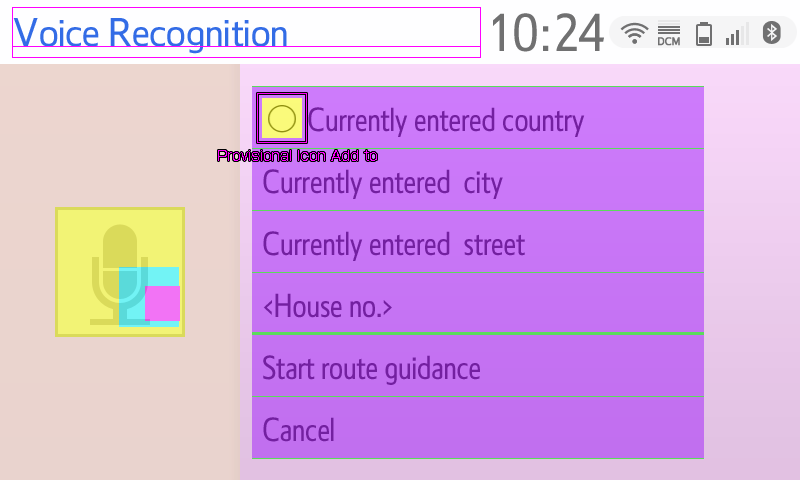
<style>
.page{position:relative;width:800px;height:480px}
.page>*{position:absolute;margin:0}
.t1{font:48px "Tfont1502_T2S";letter-spacing:0.05em;color:#707071}
.t2{font:36px "Tfont1502_T1S";color:#336ce6}
.t3{font:30px "Tfont1502_T2S";color:#7320a0}
.t4{font:14px "ShinGoPro-Regular";color:#ff00ff}
</style>
<div class="page">
<p class="t1" style="left:493px;top:13px;width:111px;height:39px">10:24</p>
<p class="t2" style="left:13px;top:18px;width:274px;height:36px">Voice Recognition</p>
<p class="t3" style="left:308px;top:107px;width:277px;height:30px">Currently entered country</p>
<p class="t4" style="left:218px;top:150px;width:159px;height:11px">Provisional Icon Add to</p>
<p class="t3" style="left:263px;top:169px;width:240px;height:30px">Currently entered  city</p>
<p class="t3" style="left:263px;top:231px;width:262px;height:30px">Currently entered  street</p>
<p class="t3" style="left:263px;top:293px;width:129px;height:25px">&lt;House no.&gt;</p>
<p class="t3" style="left:263px;top:355px;width:217px;height:30px">Start route guidance</p>
<p class="t3" style="left:263px;top:417px;width:71px;height:25px">Cancel</p>
</div>
